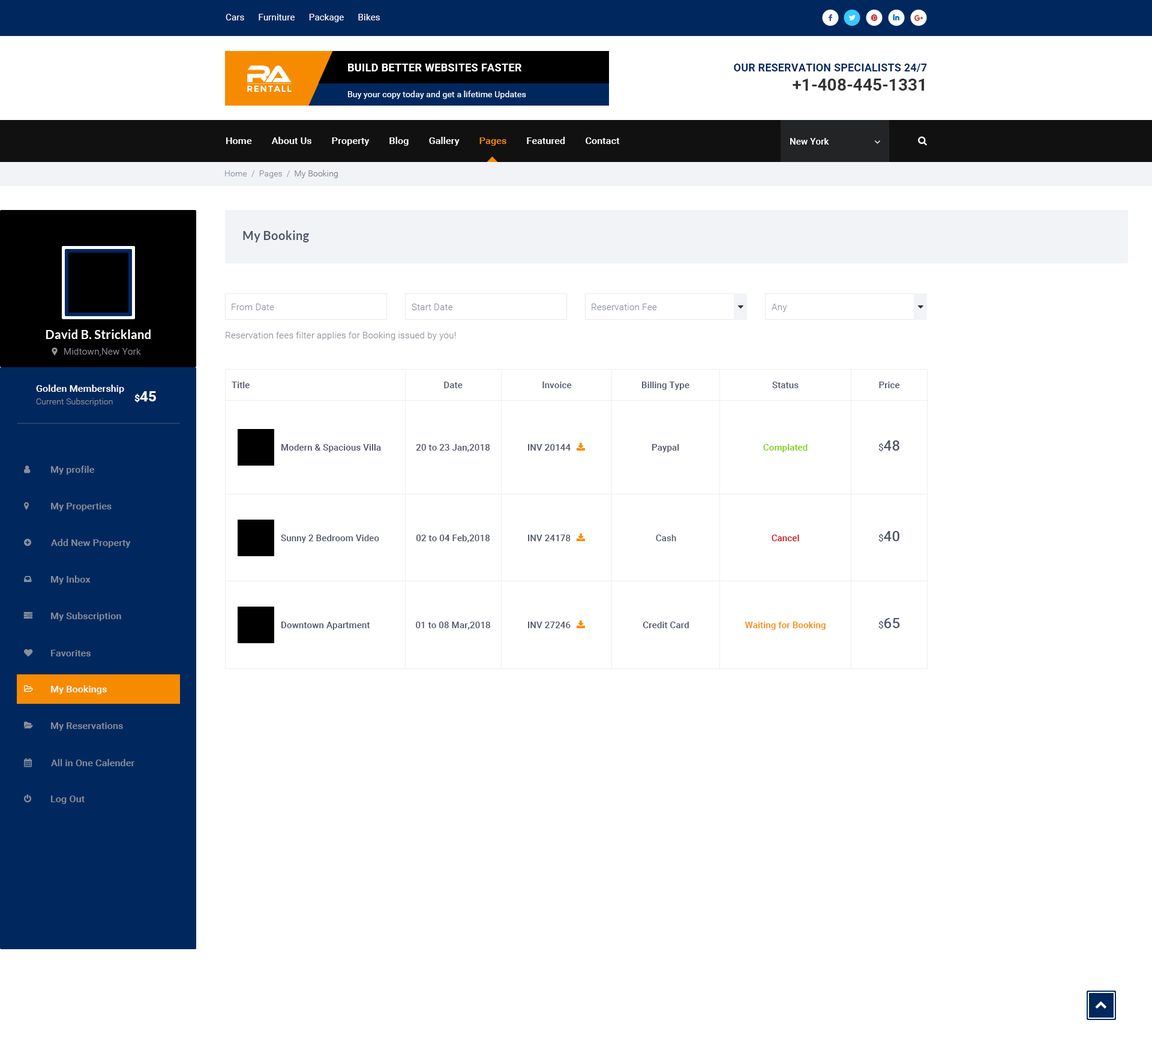
<style>
.page{position:relative;width:1152px;height:1050px;background:#ffffff}
.page>*{position:absolute;margin:0}
.t1{font:9px "Roboto-Regular";letter-spacing:0.01em;color:#ffffff}
.t2{font:10.8px "Roboto-Bold";letter-spacing:0.02em;color:#ffffff;text-transform:uppercase}
.t3{font:10.8px "Roboto-Bold";letter-spacing:0.01em;color:#00285f;text-transform:uppercase}
.t4{font:8.7px "Montserrat-Bold";letter-spacing:0.08em;color:#ffffff;text-transform:uppercase}
.t5{font:16.8px "Roboto-Bold";color:#333333}
.t6{font:8.4px "Roboto-Regular";letter-spacing:0.01em;color:#ffffff}
.t7{font:9.6px "Roboto-Medium";letter-spacing:0.01em;color:#ffffff}
.t8{font:9.6px "Roboto-Medium";letter-spacing:0.01em;color:#f78b00}
.t9{font:9px "Roboto-Medium";letter-spacing:0.01em;color:#ffffff}
.t10{font:8.4px "Roboto-Light";letter-spacing:0.01em;color:#8a8f9a}
.t11{font:8.4px "Roboto-Light";letter-spacing:0.01em;color:#757983}
.t12{font:12px "Lato-Bold";letter-spacing:0.01em;color:#4d5567}
.t13{font:9px "Roboto-Light";letter-spacing:0.01em;color:#8a8f9a}
.t14{font:12px "Lato-Bold";letter-spacing:0.01em;color:#ffffff}
.t15{font:9px "Roboto-Medium";letter-spacing:0.01em;color:#4d5567}
.t16{font:14.4px "Roboto-Bold";letter-spacing:0.01em;color:#ffffff}
.t17{font:9.6px "Roboto-Bold";letter-spacing:0.01em;color:#ffffff}
.t18{font:9px "Roboto-Medium";letter-spacing:0.01em;color:#82cc00}
.t19{font:14.4px "Roboto-Medium";letter-spacing:0.01em;color:#4d5567}
.t20{font:9.6px "Roboto-Medium";letter-spacing:0.01em;color:#8a8f9a}
.t21{font:9px "Roboto-Medium";letter-spacing:0.01em;color:#d00009}
.t22{font:9px "Roboto-Medium";letter-spacing:0.01em;color:#f78b00}
</style>
<div class="page">
<p class="t1" style="left:226px;top:14px;width:154px;height:8px">Cars      Furniture      Package      Bikes</p>
<p class="t2" style="left:348px;top:64px;width:174px;height:7px">Build better Websites Faster</p>
<p class="t3" style="left:734px;top:64px;width:193px;height:8px">Our Reservation Specialists 24/7</p>
<p class="t4" style="left:247px;top:85px;width:45px;height:7px">RentAll</p>
<p class="t5" style="left:793px;top:79px;width:131px;height:12px">+1-408-445-1331</p>
<p class="t6" style="left:348px;top:91px;width:178px;height:8px">Buy your copy today and get a lifetime Updates</p>
<p class="t7" style="left:226px;top:137px;width:394px;height:9px">Home        About Us        Property        Blog        Gallery        <span class="t8">Pages</span>        Featured        Contact</p>
<p class="t9" style="left:790px;top:138px;width:39px;height:7px">New York</p>
<p class="t10" style="left:225px;top:170px;width:113px;height:8px">Home  /  Pages  /  <span class="t11">My Booking</span></p>
<p class="t12" style="left:243px;top:230px;width:66px;height:12px">My Booking</p>
<p class="t13" style="left:232px;top:304px;width:42px;height:6px">From Date</p>
<p class="t13" style="left:412px;top:304px;width:41px;height:6px">Start Date</p>
<p class="t13" style="left:592px;top:304px;width:65px;height:6px">Reservation Fee</p>
<p class="t13" style="left:772px;top:304px;width:15px;height:8px">Any</p>
<p class="t14" style="left:46px;top:329px;width:105px;height:10px">David B. Strickland</p>
<p class="t13" style="left:226px;top:332px;width:230px;height:8px">Reservation fees filter applies for Booking issued by you!</p>
<p class="t13" style="left:64px;top:348px;width:77px;height:8px">Midtown,New York</p>
<p class="t7" style="left:36px;top:385px;width:88px;height:9px">Golden Membership</p>
<p class="t15" style="left:232px;top:382px;width:18px;height:6px">Title</p>
<p class="t15" style="left:444px;top:382px;width:19px;height:6px">Date</p>
<p class="t15" style="left:542px;top:382px;width:30px;height:6px">Invoice</p>
<p class="t15" style="left:642px;top:382px;width:47px;height:8px">Billing Type</p>
<p class="t15" style="left:772px;top:382px;width:27px;height:6px">Status</p>
<p class="t15" style="left:879px;top:382px;width:21px;height:6px">Price</p>
<p class="t10" style="left:36px;top:398px;width:77px;height:8px">Current Subscription</p>
<p class="t16" style="left:134px;top:391px;width:22px;height:12px"><span class="t17">$</span>45</p>
<p class="t15" style="left:281px;top:444px;width:100px;height:8px">Modern &amp; Spacious Villa</p>
<p class="t15" style="left:416px;top:444px;width:74px;height:8px">20 to 23 Jan,2018</p>
<p class="t15" style="left:528px;top:444px;width:43px;height:7px">INV 20144</p>
<p class="t15" style="left:652px;top:444px;width:27px;height:8px">Paypal</p>
<p class="t18" style="left:763px;top:444px;width:45px;height:8px">Complated</p>
<p class="t19" style="left:878px;top:440px;width:21px;height:12px"><span class="t15">$</span>48</p>
<p class="t20" style="left:51px;top:466px;width:43px;height:9px">My profile</p>
<p class="t20" style="left:51px;top:503px;width:61px;height:8px">My Properties</p>
<p class="t19" style="left:878px;top:531px;width:21px;height:11px"><span class="t15">$</span>40</p>
<p class="t20" style="left:51px;top:539px;width:80px;height:9px">Add New Property</p>
<p class="t15" style="left:281px;top:535px;width:98px;height:8px">Sunny 2 Bedroom Video</p>
<p class="t15" style="left:416px;top:535px;width:74px;height:7px">02 to 04 Feb,2018</p>
<p class="t15" style="left:528px;top:535px;width:43px;height:6px">INV 24178</p>
<p class="t15" style="left:656px;top:535px;width:20px;height:6px">Cash</p>
<p class="t21" style="left:772px;top:535px;width:27px;height:6px">Cancel</p>
<p class="t20" style="left:51px;top:575px;width:40px;height:9px">My Inbox</p>
<p class="t20" style="left:51px;top:612px;width:70px;height:9px">My Subscription</p>
<p class="t15" style="left:281px;top:622px;width:89px;height:8px">Downtown Apartment</p>
<p class="t15" style="left:416px;top:622px;width:74px;height:7px">01 to 08 Mar,2018</p>
<p class="t15" style="left:528px;top:622px;width:43px;height:6px">INV 27246</p>
<p class="t15" style="left:643px;top:622px;width:46px;height:6px">Credit Card</p>
<p class="t22" style="left:745px;top:622px;width:81px;height:8px">Waiting for Booking</p>
<p class="t19" style="left:878px;top:618px;width:22px;height:11px"><span class="t15">$</span>65</p>
<p class="t20" style="left:51px;top:650px;width:40px;height:6px">Favorites</p>
<p class="t7" style="left:51px;top:685px;width:56px;height:9px">My Bookings</p>
<p class="t20" style="left:51px;top:722px;width:72px;height:9px">My Reservations</p>
<p class="t20" style="left:51px;top:759px;width:83px;height:7px">All in One Calender</p>
<p class="t20" style="left:51px;top:796px;width:34px;height:8px">Log Out</p>
</div>
